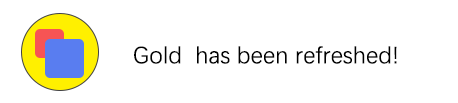
<style>
.page{position:relative;width:458px;height:103px;background:#ffffff}
.page>*{position:absolute;margin:0}
.t1{font:24px "DengXian";color:#000000}
</style>
<div class="page">
<p class="t1" style="left:134px;top:46px;width:263px;height:18px">Gold  has been refreshed!</p>
</div>
